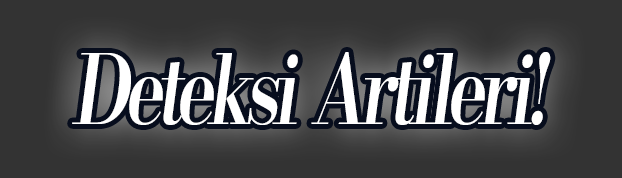
<style>
.page{position:relative;width:622px;height:178px;background:#333333}
.page>*{position:absolute;margin:0}
.t1{font:96px "KochoStd-Heavy";letter-spacing:-0.08em;color:#ffffff;font-style:italic;scale:0.75 1}
</style>
<div class="page">
<p class="t1" style="left:72px;top:52px;width:479px;height:73px">Deteksi Artileri!</p>
</div>
